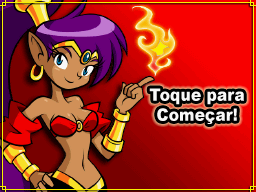
<style>
.page{position:relative;width:256px;height:192px}
.page>*{position:absolute;margin:0}
.t1{font:17.3px/20px "Arial-Black";color:#f8f8f8;scale:0.9 1}
</style>
<div class="page">
<p class="t1" style="left:149px;top:88px;width:95px;height:36px;text-align:center">Toque para<br>Começar!</p>
</div>
